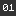
<style>
.page{position:relative;width:16px;height:16px;background:#333333}
.page>*{position:absolute;margin:0}
.t1{font:8.3px "Minecraftia-Regular";color:#ffffff}
</style>
<div class="page">
<p class="t1" style="left:3px;top:4px;width:11px;height:7px">01</p>
</div>
